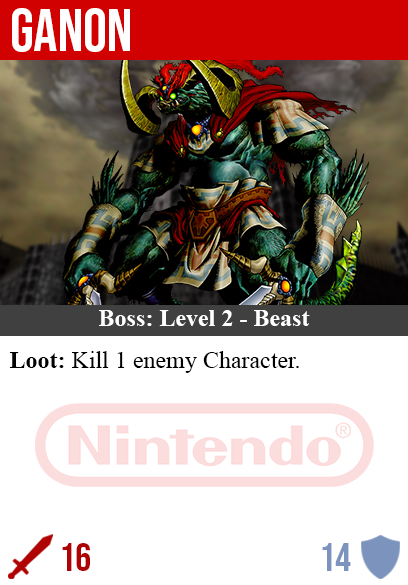
<style>
.page{position:relative;width:408px;height:585px;background:#ffffff}
.page>*{position:absolute;margin:0}
.t1{font:60px "BebasNeue-Regular";color:#ffffff}
.t2{font:24px "TimesNewRomanPS-BoldMT";color:#ffffff}
.t3{font:24px "TimesNewRomanPSMT";color:#000000}
.t4{font:24px "TimesNewRomanPS-BoldMT";color:#000000}
.t5{font:40px "BebasNeue-Regular";color:#af0202}
.t6{font:40px "BebasNeue-Regular";color:#7c94bd}
</style>
<div class="page">
<p class="t1" style="left:12px;top:8px;width:118px;height:44px">ganon</p>
<p class="t2" style="left:99px;top:310px;width:211px;height:16px">Boss: Level 2 - Beast</p>
<p class="t3" style="left:9px;top:351px;width:290px;height:22px"><span class="t4">Loot: </span>Kill 1 enemy Character.</p>
<p class="t5" style="left:62px;top:543px;width:28px;height:28px">16</p>
<p class="t6" style="left:322px;top:543px;width:29px;height:28px">14</p>
</div>
